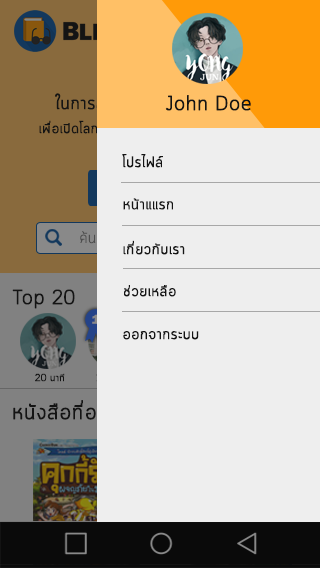
<style>
.page{position:relative;width:320px;height:568px;background:#eeeeee}
.page>*{position:absolute;margin:0}
.t1{font:20px "Cloud-Light";color:#141414;font-weight:bold}
.t2{font:15px "Cloud-Light";color:#141414;font-weight:bold}
</style>
<div class="page">
<p class="t1" style="left:165px;top:95px;width:86px;height:16px">John Doe</p>
<p class="t2" style="left:122px;top:154px;width:41px;height:14px">โปรไฟล์</p>
<p class="t2" style="left:123px;top:198px;width:50px;height:12px">หน้าแแรก</p>
<p class="t2" style="left:123px;top:240px;width:62px;height:15px">เกี่ยวกับเรา</p>
<p class="t2" style="left:124px;top:285px;width:52px;height:12px">ช่วยเหลือ</p>
<p class="t2" style="left:123px;top:331px;width:76px;height:9px">ออกจากระบบ</p>
</div>
